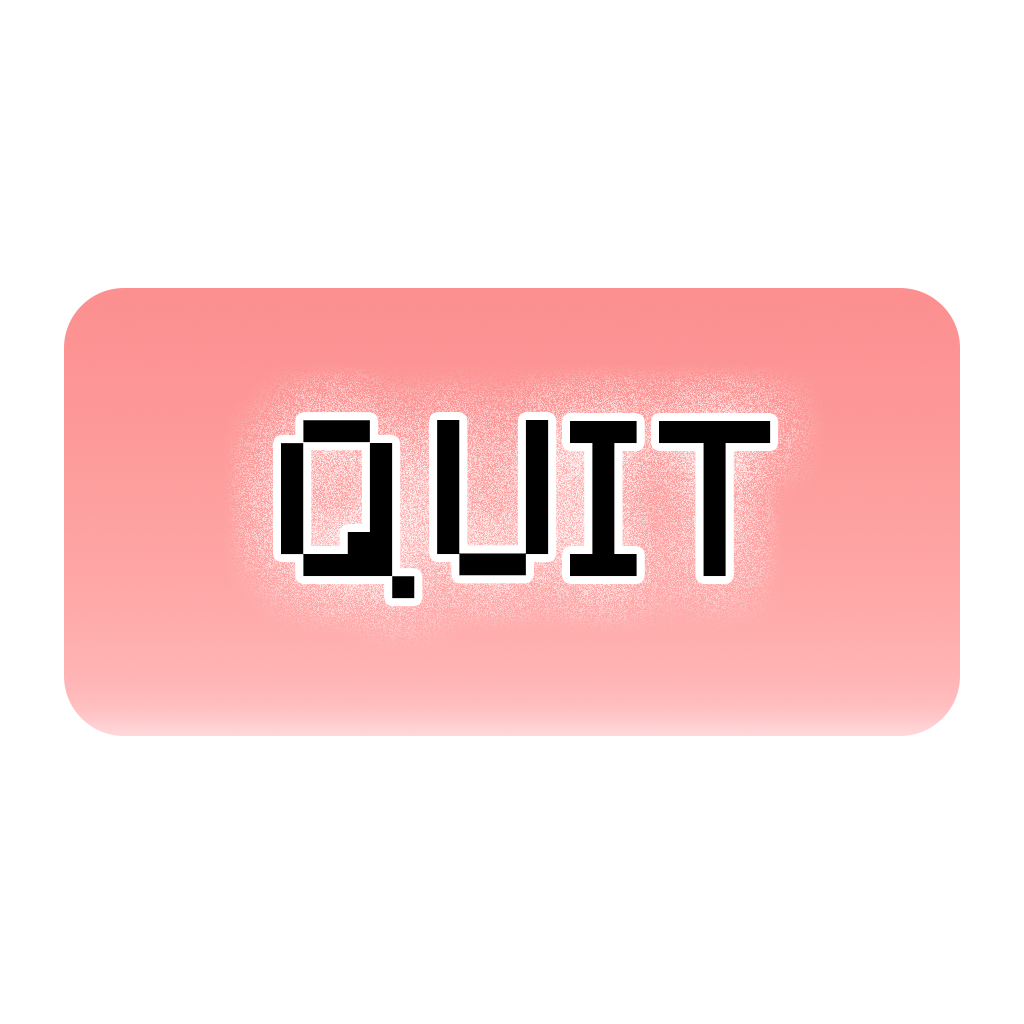
<style>
.page{position:relative;width:1024px;height:1024px;background:#ffffff}
.page>*{position:absolute;margin:0}
.t1{font:200px "VolterGoldfish";color:#000000}
</style>
<div class="page">
<p class="t1" style="left:281px;top:420px;width:490px;height:179px">QUIT</p>
</div>
